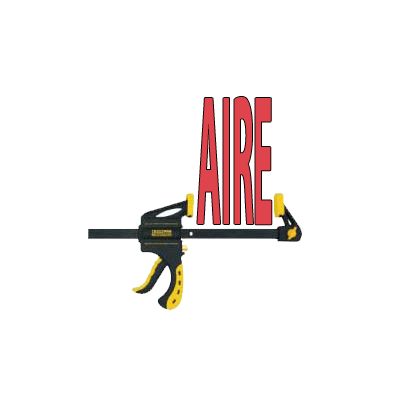
<style>
.page{position:relative;width:400px;height:400px;background:#ffffff}
.page>*{position:absolute;margin:0}
.t1{font:187.7px "MyriadPro-Bold";color:#df444c;scale:0.2 1}
</style>
<div class="page">
<p class="t1" style="left:197px;top:97px;width:75px;height:128px">AIRE</p>
</div>
